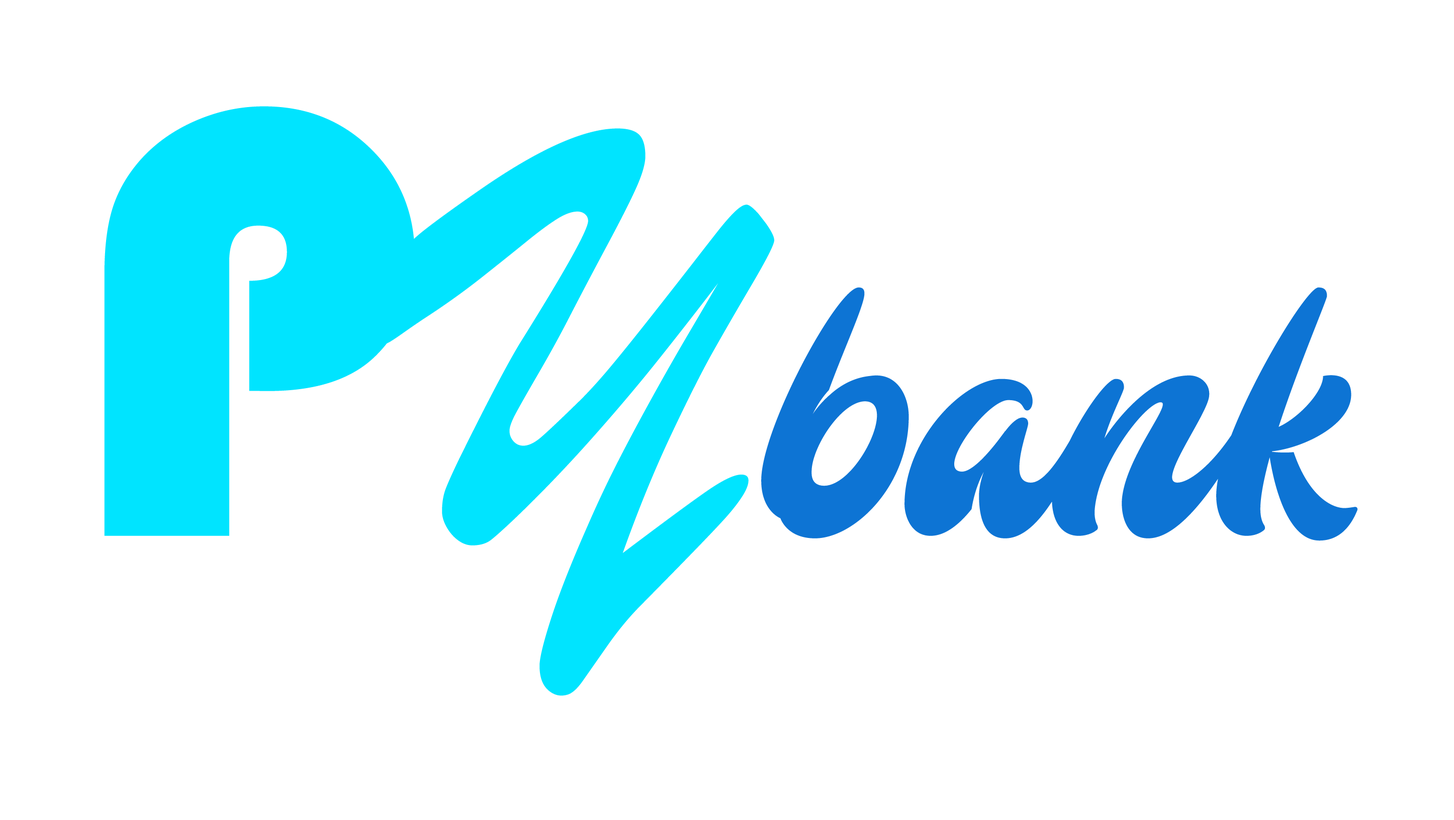
<style>
.page{position:relative;width:1454px;height:820px;background:#ffffff}
.page>*{position:absolute;margin:0}
.t1{font:314.2px "Mustardo";color:#0d74d4}
.t2{font:628.5px "Bauhaus93";color:#00e4ff}
.t3{font:628.5px "BrushScriptMT";color:#00e4ff}
</style>
<div class="page">
<p class="t1" style="left:104px;top:106px;width:1254px;height:590px"><span class="t2">P</span><span class="t3">Y</span>bank</p>
</div>
